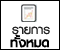
<style>
.page{position:relative;width:60px;height:50px;background:#ffffff}
.page>*{position:absolute;margin:0}
.t1{font:18px "PSLxKittithada-Bold";color:#202020}
.t2{font:18px "PSLxKittithada-Bold";color:#000000;font-weight:bold}
</style>
<div class="page">
<p class="t1" style="left:12px;top:26px;width:38px;height:9px">รายการ</p>
<p class="t2" style="left:10px;top:34px;width:39px;height:14px">ทั้งหมด</p>
</div>
